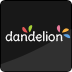
<style>
.page{position:relative;width:72px;height:72px;background:#181818}
.page>*{position:absolute;margin:0}
.t1{font:13px "Delius-Regular";color:#ffffff}
</style>
<div class="page">
<p class="t1" style="left:5px;top:31px;width:58px;height:11px">dandelion</p>
</div>
